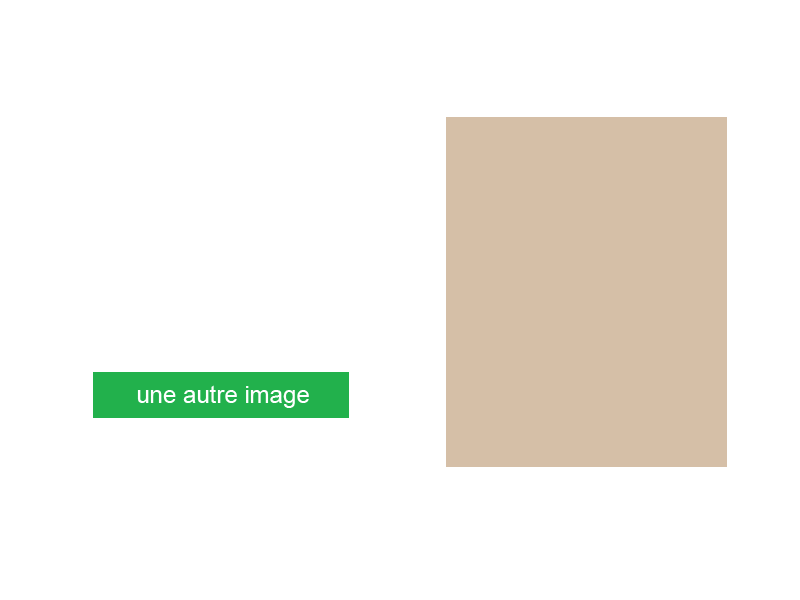
<style>
.page{position:relative;width:800px;height:600px;background:#ffffff}
.page>*{position:absolute;margin:0}
.t1{font:24px "ArialMT";color:#ffffff}
</style>
<div class="page">
<p class="t1" style="left:137px;top:385px;width:172px;height:23px">une autre image</p>
</div>
